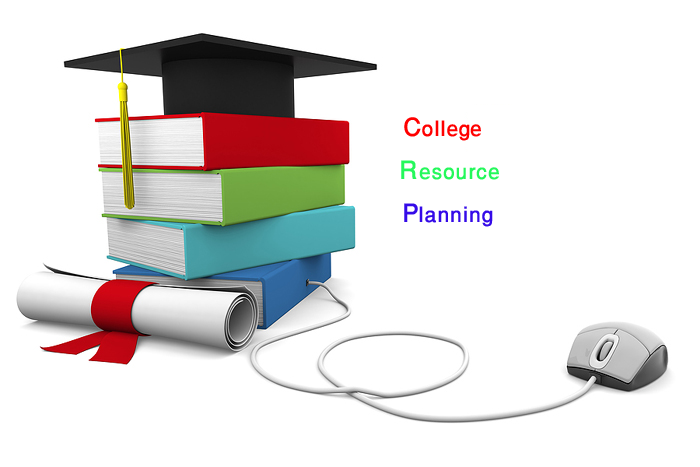
<style>
.page{position:relative;width:700px;height:467px;background:#ffffff}
.page>*{position:absolute;margin:0}
.t1{font:30px "WinSoftPro-Medium";color:#24f85b}
.t2{font:36px "WinSoftPro-Medium";color:#ff0000}
.t3{font:30px "WinSoftPro-Medium";color:#ff0000}
.t4{font:36px "WinSoftPro-Medium";color:#24f85b}
.t5{font:36px "WinSoftPro-Medium";color:#340ae8}
.t6{font:30px "WinSoftPro-Medium";color:#340ae8}
</style>
<div class="page">
<p class="t1" style="left:401px;top:117px;width:98px;height:110px"><span class="t2">C</span><span class="t3">ollege   <br></span><span class="t4">R</span>esource<br><span class="t5">P</span><span class="t6">lanning</span></p>
</div>
